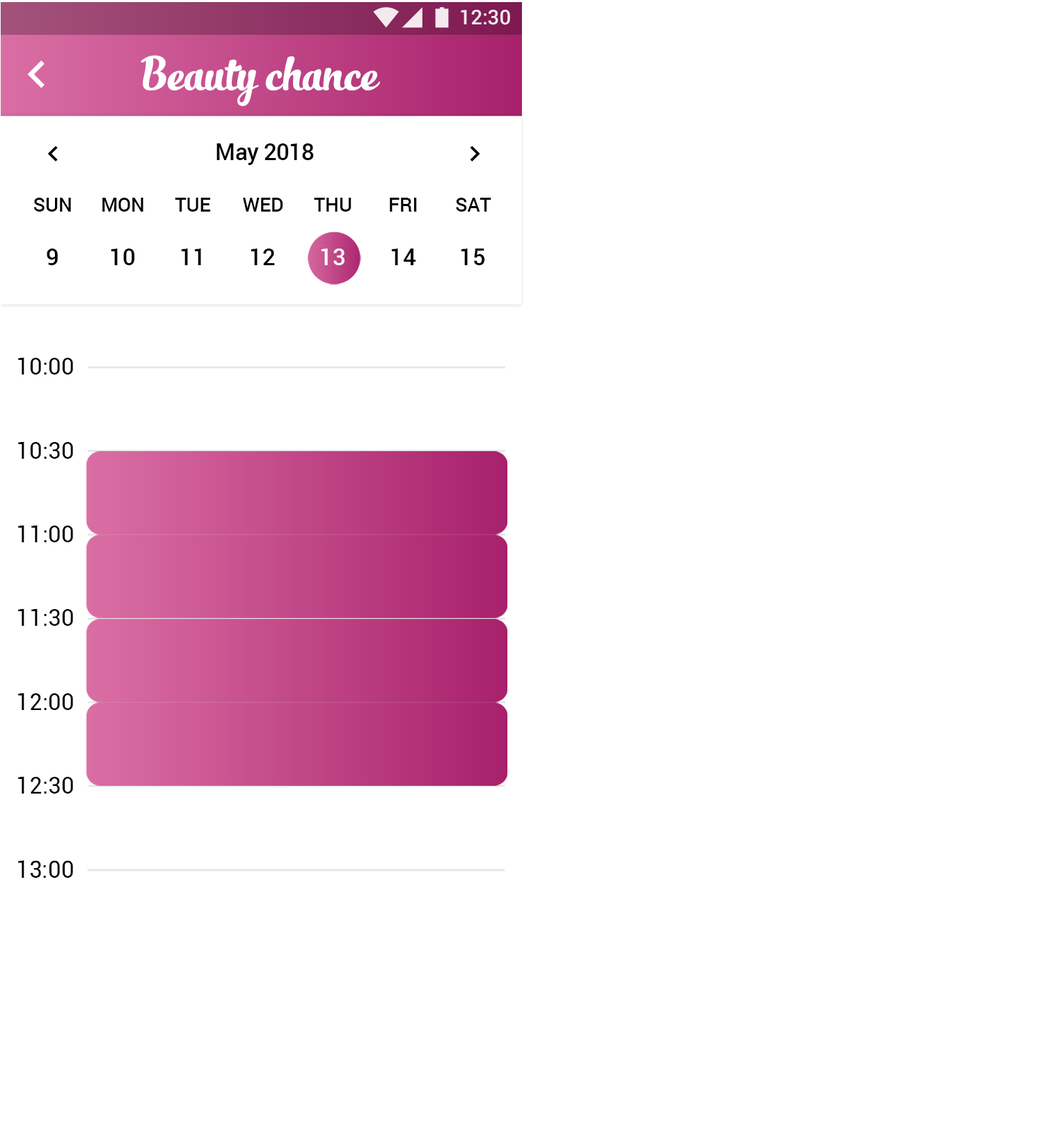
<style>
.page{position:relative;width:1044px;height:1143px;background:#ffffff}
.page>*{position:absolute;margin:0}
.t1{font:20.3px "Roboto-Medium";color:#ffffff}
.t2{font:34.8px "SlimTony-Italic";color:#ffffff}
.t3{font:23.2px "Roboto-Medium";letter-spacing:-0.023em;color:#000000}
.t4{font:19.3px "Roboto-Medium";color:#000000}
.t5{font:23.2px "Roboto-Medium";color:#000000}
.t6{font:23.2px "Roboto-Medium";color:#ffffff}
.t7{font:23.2px "Roboto-Regular";color:#000000}
.t8{font:23.5px "Roboto-Regular";color:#000000}
</style>
<div class="page">
<p class="t1" style="left:461px;top:10px;width:49px;height:15px">12:30</p>
<p class="t2" style="left:141px;top:55px;width:239px;height:51px">Beauty chance</p>
<p class="t3" style="left:216px;top:143px;width:98px;height:22px">May 2018</p>
<p class="t4" style="left:33px;top:198px;width:38px;height:14px">SUN</p>
<p class="t4" style="left:102px;top:198px;width:41px;height:14px">MON</p>
<p class="t4" style="left:175px;top:198px;width:36px;height:14px">TUE</p>
<p class="t4" style="left:243px;top:198px;width:40px;height:14px">WED</p>
<p class="t4" style="left:314px;top:198px;width:37px;height:14px">THU</p>
<p class="t4" style="left:390px;top:198px;width:27px;height:14px">FRI</p>
<p class="t4" style="left:456px;top:198px;width:35px;height:14px">SAT</p>
<p class="t5" style="left:47px;top:248px;width:11px;height:17px">9</p>
<p class="t5" style="left:111px;top:248px;width:24px;height:17px">10</p>
<p class="t5" style="left:181px;top:248px;width:20px;height:17px">11</p>
<p class="t5" style="left:250px;top:248px;width:25px;height:17px">12</p>
<p class="t6" style="left:321px;top:248px;width:23px;height:17px">13</p>
<p class="t5" style="left:391px;top:248px;width:24px;height:17px">14</p>
<p class="t5" style="left:461px;top:248px;width:24px;height:17px">15</p>
<p class="t7" style="left:18px;top:357px;width:55px;height:17px">10:00</p>
<p class="t7" style="left:18px;top:441px;width:55px;height:18px">10:30</p>
<p class="t7" style="left:18px;top:525px;width:55px;height:17px">11:00</p>
<p class="t7" style="left:18px;top:608px;width:55px;height:18px">11:30</p>
<p class="t7" style="left:18px;top:692px;width:55px;height:18px">12:00</p>
<p class="t7" style="left:18px;top:776px;width:55px;height:17px">12:30</p>
<p class="t8" style="left:18px;top:860px;width:55px;height:17px">13:00</p>
</div>
